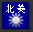
<style>
.page{position:relative;width:33px;height:32px;background:#000090}
.page>*{position:absolute;margin:0}
.t1{font:10.4px "SimSun";color:#ffffff}
</style>
<div class="page">
<p class="t1" style="left:6px;top:4px;width:19px;height:9px">北美</p>
</div>
